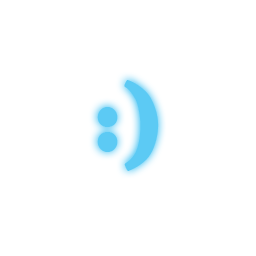
<style>
.page{position:relative;width:256px;height:256px;background:#ffffff}
.page>*{position:absolute;margin:0}
.t1{font:100px "BerlinSansFBDemi-Bold";letter-spacing:0.025em;color:#5ccaf4;text-transform:uppercase}
</style>
<div class="page">
<p class="t1" style="left:97px;top:80px;width:62px;height:91px">:)</p>
</div>
